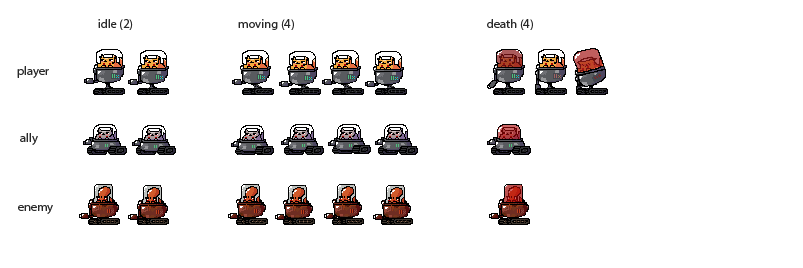
<style>
.page{position:relative;width:803px;height:268px;background:#ffffff}
.page>*{position:absolute;margin:0}
.t1{font:12.5px "MyriadPro-Regular";color:#282828}
</style>
<div class="page">
<p class="t1" style="left:98px;top:19px;width:35px;height:11px">idle (2)</p>
<p class="t1" style="left:238px;top:19px;width:56px;height:11px">moving (4)</p>
<p class="t1" style="left:487px;top:19px;width:46px;height:11px">death (4)</p>
<p class="t1" style="left:17px;top:66px;width:32px;height:12px">player</p>
<p class="t1" style="left:20px;top:133px;width:18px;height:12px">ally</p>
<p class="t1" style="left:18px;top:205px;width:35px;height:9px">enemy</p>
</div>
